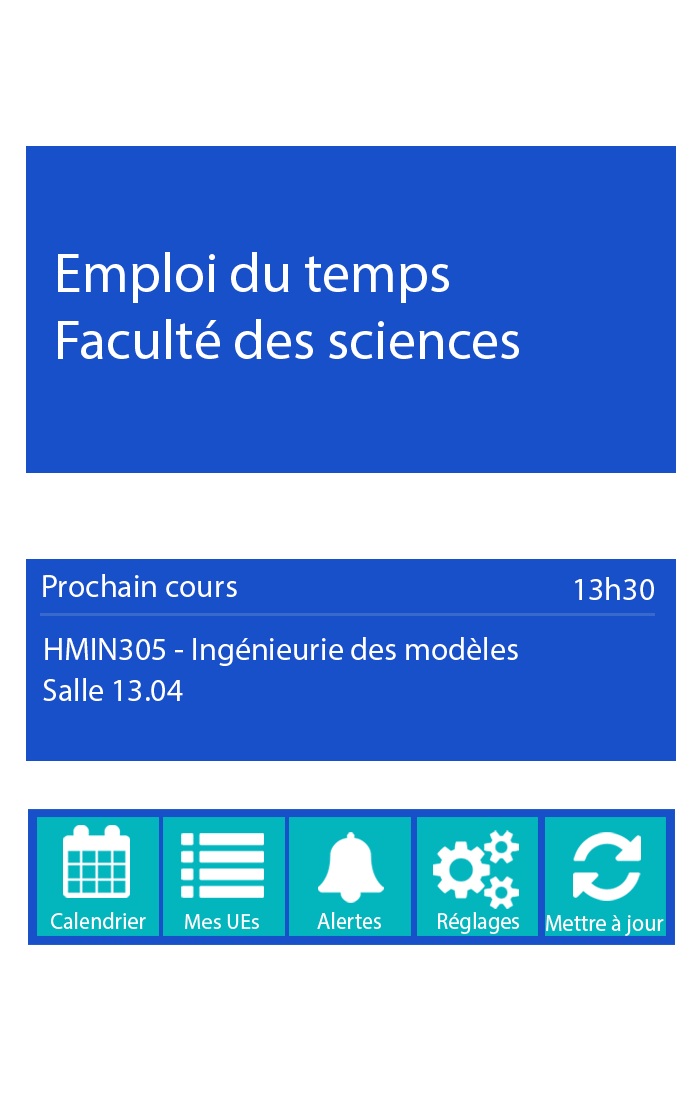
<style>
.page{position:relative;width:700px;height:1100px;background:#ffffff}
.page>*{position:absolute;margin:0}
.t1{font:56px "MyriadPro-Regular";color:#ffffff}
.t2{font:32px "MyriadPro-Regular";color:#ffffff}
.t3{font:23.2px "MyriadPro-Regular";color:#ffffff;scale:0.95 1}
.t4{font:22.3px "MyriadPro-Regular";color:#ffffff}
</style>
<div class="page">
<p class="t1" style="left:58px;top:252px;width:461px;height:107px">Emploi du temps<br>Faculté des sciences</p>
<p class="t2" style="left:43px;top:574px;width:194px;height:23px">Prochain cours</p>
<p class="t2" style="left:575px;top:577px;width:79px;height:23px">13h30</p>
<p class="t2" style="left:45px;top:637px;width:473px;height:29px">HMIN305 - Ingénieurie des modèles</p>
<p class="t2" style="left:43px;top:678px;width:140px;height:23px">Salle 13.04</p>
<p class="t3" style="left:51px;top:912px;width:95px;height:17px">Calendrier</p>
<p class="t4" style="left:185px;top:914px;width:74px;height:15px">Mes UEs</p>
<p class="t3" style="left:317px;top:912px;width:64px;height:17px">Alertes</p>
<p class="t3" style="left:438px;top:912px;width:82px;height:22px">Réglages</p>
<p class="t3" style="left:546px;top:915px;width:118px;height:21px">Mettre à jour</p>
</div>
